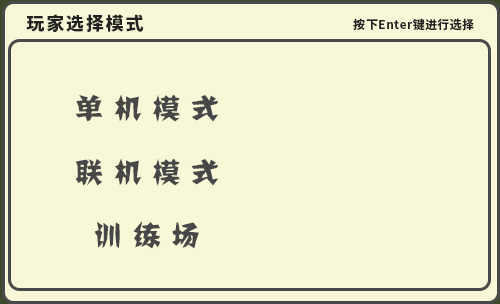
<style>
.page{position:relative;width:500px;height:304px;background:#f8f7d8}
.page>*{position:absolute;margin:0}
.t1{font:18px "SourceHanSansCN-Heavy";letter-spacing:0.1em;color:#222222}
.t2{font:12px "SourceHanSansCN-Bold";letter-spacing:0.03em;color:#222222}
.t3{font:28px "JJianzi";letter-spacing:0.38em;color:#474747}
</style>
<div class="page">
<p class="t1" style="left:26px;top:14px;width:118px;height:18px">玩家选择模式</p>
<p class="t2" style="left:353px;top:18px;width:121px;height:13px">按下Enter键进行选择</p>
<p class="t3" style="left:75px;top:94px;width:144px;height:28px">单机模式</p>
<p class="t3" style="left:75px;top:158px;width:144px;height:28px">联机模式</p>
<p class="t3" style="left:94px;top:221px;width:105px;height:28px">训练场</p>
</div>
